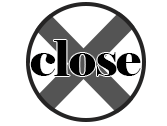
<style>
.page{position:relative;width:167px;height:126px;background:#ffffff}
.page>*{position:absolute;margin:0}
.t1{font:49.2px "Elephant-Regular";letter-spacing:-0.02em;color:#000000;scale:0.95 1}
</style>
<div class="page">
<p class="t1" style="left:30px;top:40px;width:111px;height:36px">close</p>
</div>
